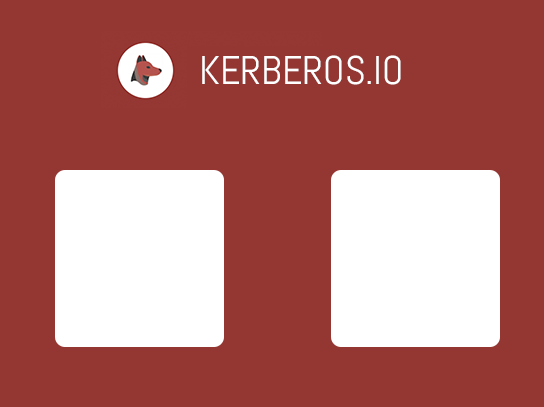
<style>
.page{position:relative;width:544px;height:407px;background:#943733}
.page>*{position:absolute;margin:0}
.t1{font:40px "Abel-Regular";color:#ffffff}
</style>
<div class="page">
<p class="t1" style="left:202px;top:55px;width:199px;height:30px">KERBEROS.IO</p>
</div>
